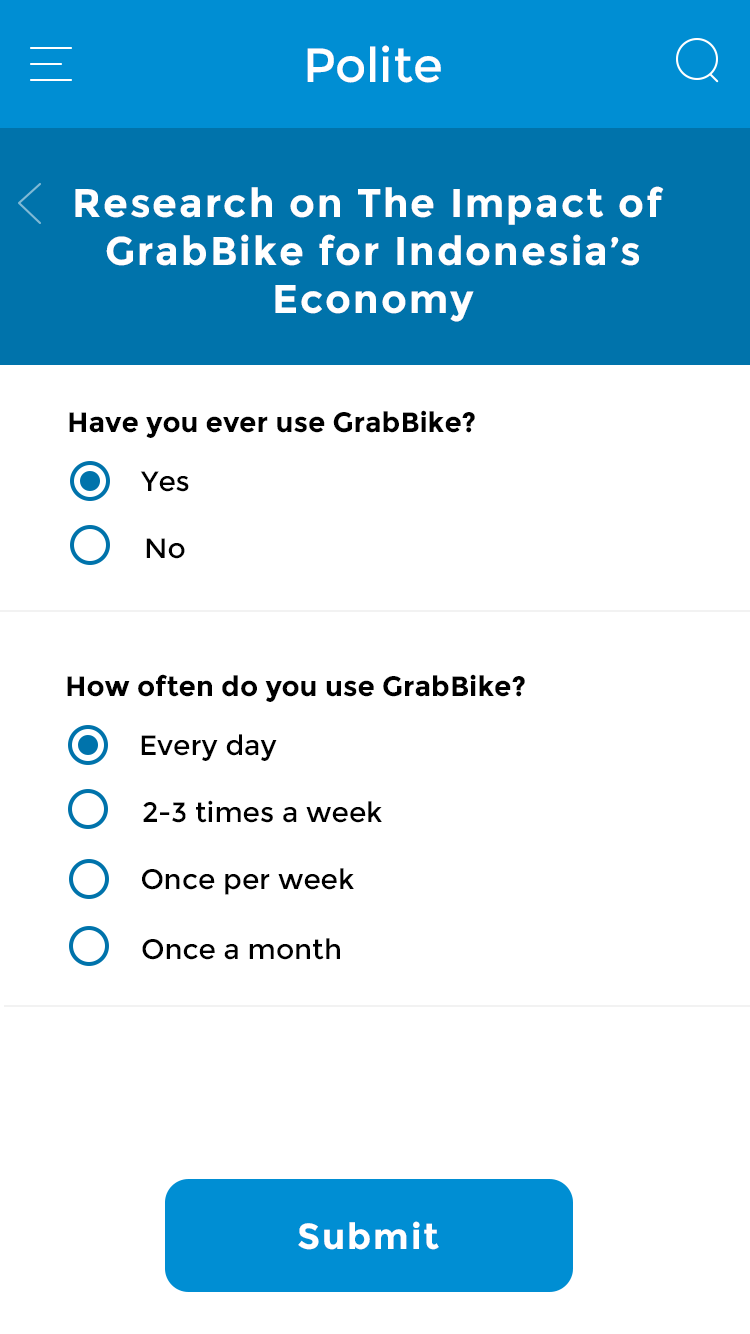
<style>
.page{position:relative;width:750px;height:1334px;background:#ffffff}
.page>*{position:absolute;margin:0}
.t1{font:48px "Montserrat-Regular";color:#ffffff}
.t2{font:40px/48px "Montserrat-Bold";letter-spacing:0.05em;color:#ffffff}
.t3{font:28px "Montserrat-Bold";color:#000000}
.t4{font:28px "Montserrat-Regular";color:#000000}
.t5{font:36px "Montserrat-Bold";letter-spacing:0.05em;color:#ffffff}
</style>
<div class="page">
<p class="t1" style="left:307px;top:45px;width:134px;height:38px">Polite</p>
<p class="t2" style="left:75px;top:186px;width:589px;height:136px;text-align:center">Research on The Impact of <br>GrabBike for Indonesia’s<br>Economy</p>
<p class="t3" style="left:69px;top:410px;width:406px;height:28px">Have you ever use GrabBike?</p>
<p class="t4" style="left:140px;top:471px;width:49px;height:21px">Yes</p>
<p class="t4" style="left:146px;top:538px;width:39px;height:21px">No</p>
<p class="t3" style="left:67px;top:674px;width:458px;height:28px">How often do you use GrabBike?</p>
<p class="t4" style="left:141px;top:734px;width:136px;height:27px">Every day</p>
<p class="t4" style="left:143px;top:800px;width:239px;height:23px">2-3 times a week</p>
<p class="t4" style="left:142px;top:868px;width:212px;height:27px">Once per week</p>
<p class="t4" style="left:142px;top:938px;width:198px;height:22px">Once a month</p>
<p class="t5" style="left:298px;top:1221px;width:141px;height:29px">Submit</p>
</div>
